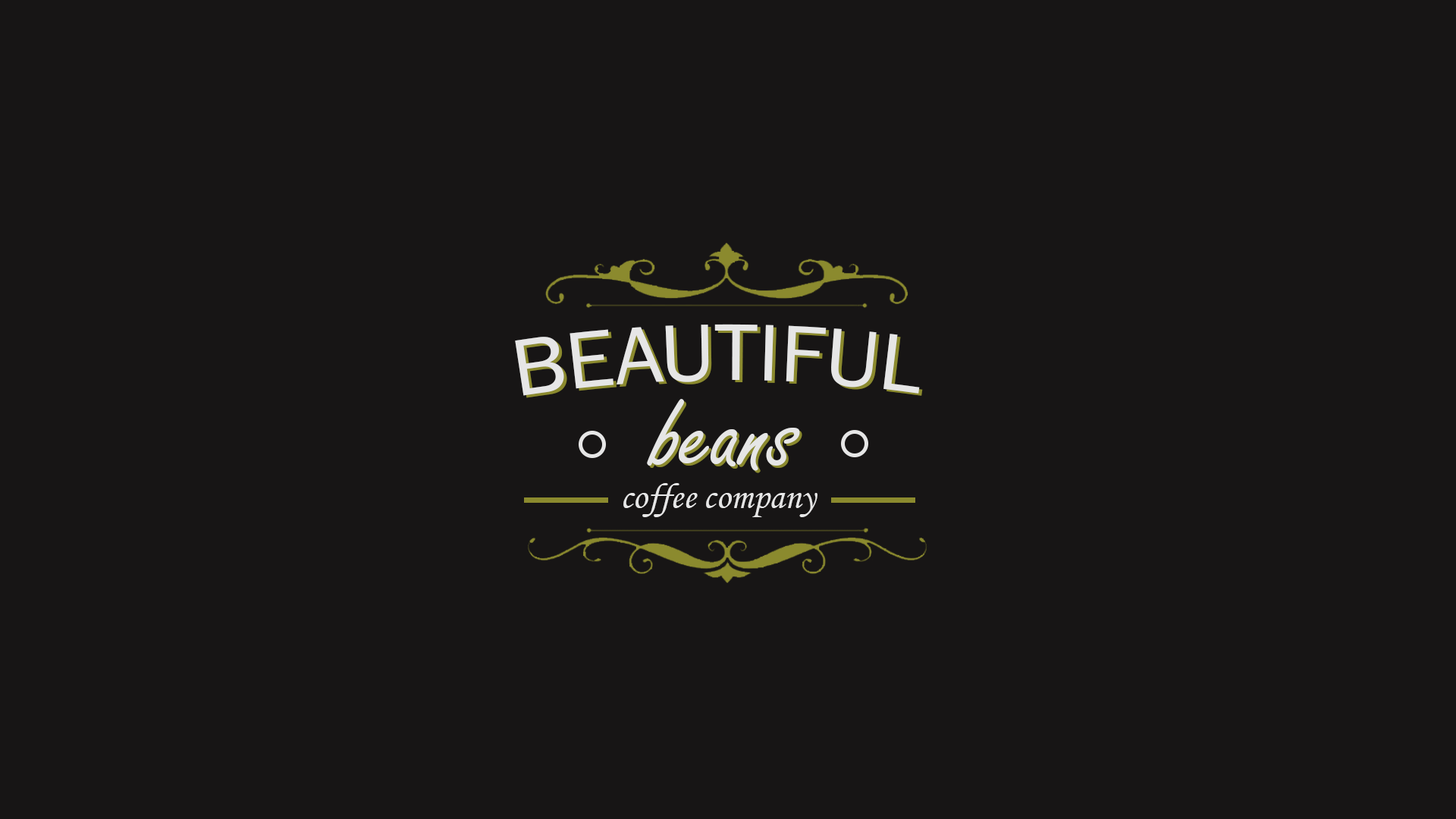
<style>
.page{position:relative;width:1456px;height:819px;background:#171515}
.page>*{position:absolute;margin:0}
.t1{font:83.4px "FranklinGothic-Book";color:#e6e6e6}
.t2{font:83.4px "FranklinGothic-Book"}
.t3{font:110.7px "FreestyleScript-Regular";color:#e6e6e6}
.t4{font:110.7px "FreestyleScript-Regular"}
.t5{font:36.4px "MonotypeCorsiva";color:#e6e6e6}
</style>
<div class="page">
<p class="t1" style="left:515px;top:324px;width:405px;height:72px">BEAUTIFUL</p>
<p class="t2" style="left:518px;top:326px;width:405px;height:72px">BEAUTIFUL</p>
<p class="t3" style="left:647px;top:399px;width:153px;height:72px">beans</p>
<p class="t4" style="left:649px;top:401px;width:153px;height:72px">beans</p>
<p class="t5" style="left:623px;top:483px;width:194px;height:34px">coffee company</p>
</div>
